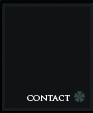
<style>
.page{position:relative;width:93px;height:113px;background:#111214}
.page>*{position:absolute;margin:0}
.t1{font:9px "TrajanPro-Regular";color:#ffffff}
</style>
<div class="page">
<p class="t1" style="left:27px;top:95px;width:43px;height:6px">contact</p>
</div>
